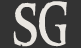
<style>
.page{position:relative;width:81px;height:48px;background:#333333}
.page>*{position:absolute;margin:0}
.t1{font:42px "RingbearerMedium";color:#e9e6e1;text-transform:uppercase}
</style>
<div class="page">
<p class="t1" style="left:13px;top:1px;width:54px;height:46px">SG</p>
</div>
